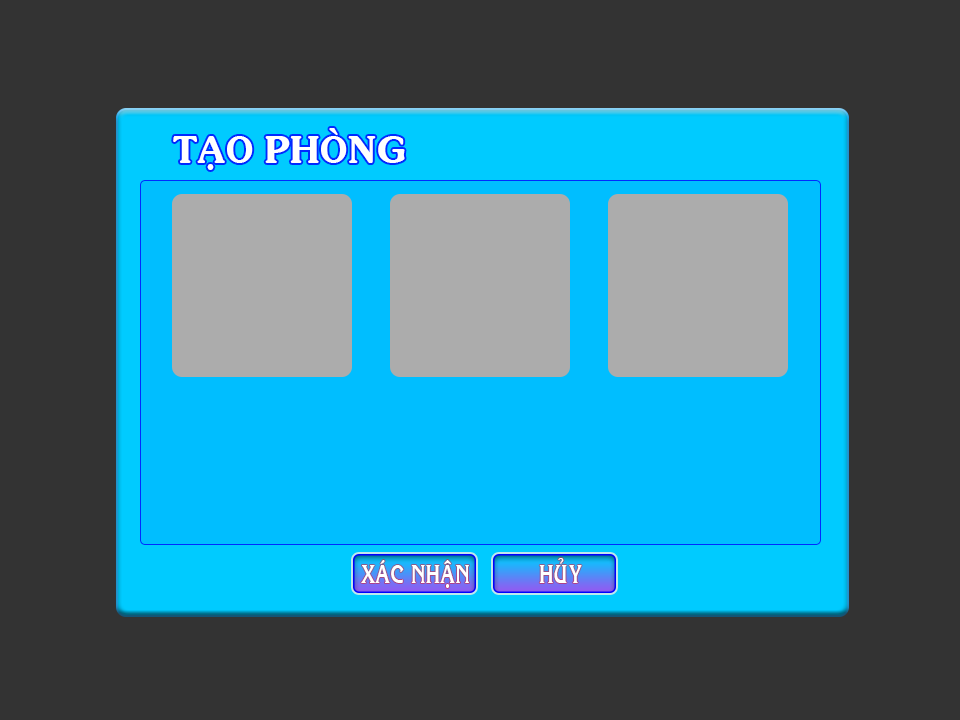
<style>
.page{position:relative;width:960px;height:720px;background:#333333}
.page>*{position:absolute;margin:0}
.t1{font:36px "VNI-Souvir-Bold";color:#ffffff}
.t2{font:24px "VNI-Korin-Bold";color:#ffffff;scale:0.8 1}
</style>
<div class="page">
<p class="t1" style="left:173px;top:128px;width:232px;height:42px">TAÏO PHOØNG</p>
<p class="t2" style="left:539px;top:558px;width:43px;height:25px">HUÛY</p>
<p class="t2" style="left:361px;top:560px;width:108px;height:28px">XAÙC NHAÄN</p>
</div>
